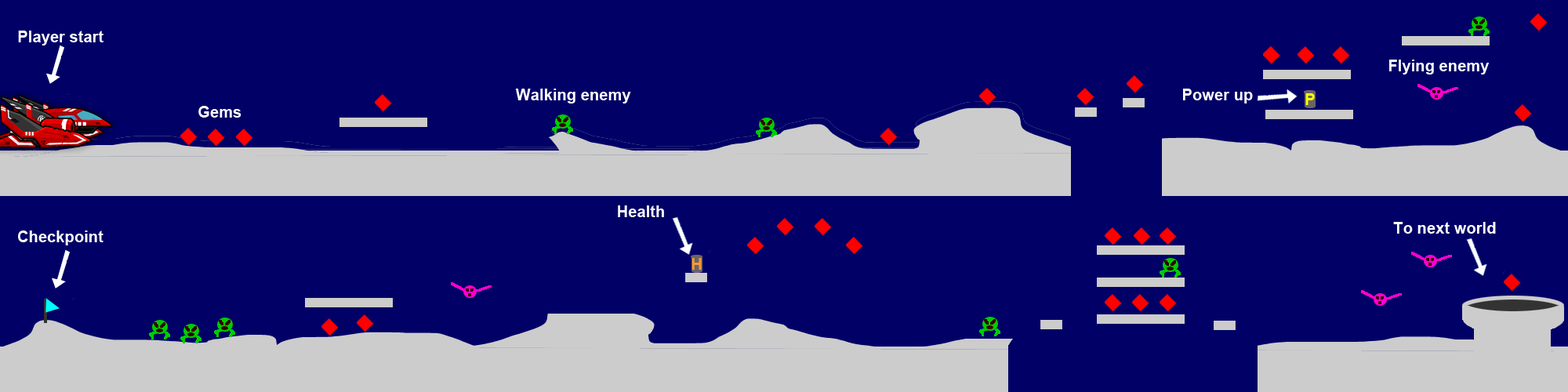
<style>
.page{position:relative;width:1568px;height:392px;background:#000066}
.page>*{position:absolute;margin:0}
.t1{font:15.8px "Arial-BoldMT";color:#ffffff}
</style>
<div class="page">
<p class="t1" style="left:18px;top:31px;width:85px;height:14px">Player start</p>
<p class="t1" style="left:1389px;top:60px;width:101px;height:14px">Flying enemy</p>
<p class="t1" style="left:515px;top:89px;width:116px;height:14px">Walking enemy</p>
<p class="t1" style="left:1183px;top:89px;width:70px;height:14px">Power up</p>
<p class="t1" style="left:198px;top:106px;width:43px;height:12px">Gems</p>
<p class="t1" style="left:618px;top:205px;width:46px;height:12px">Health</p>
<p class="t1" style="left:1393px;top:222px;width:103px;height:12px">To next world</p>
<p class="t1" style="left:18px;top:230px;width:85px;height:15px">Checkpoint</p>
</div>
